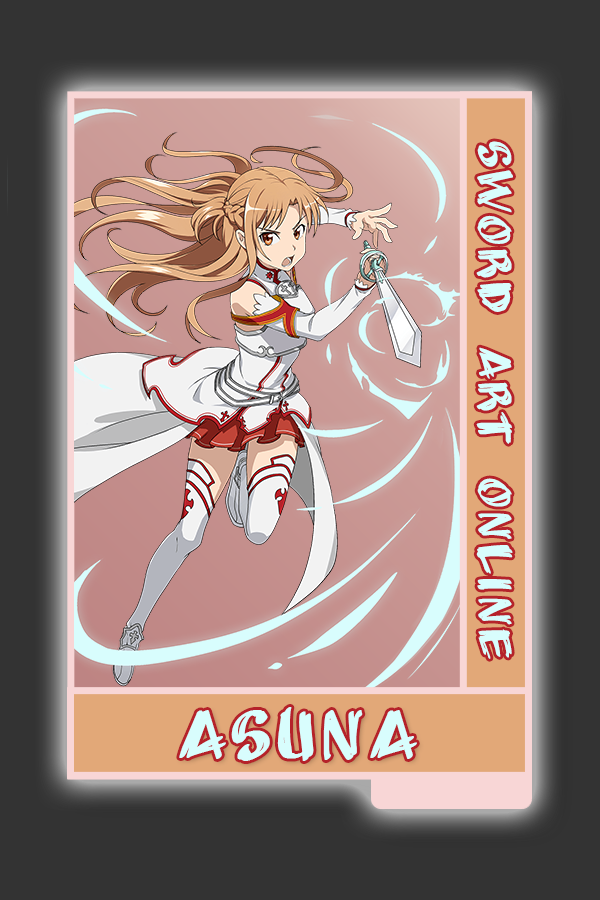
<style>
.page{position:relative;width:600px;height:900px;background:#333333}
.page>*{position:absolute;margin:0}
.t1{font:40px "AnuDaw";color:#d8fdfd}
.t2{font:60px "AnuDaw";color:#d8fdfd}
</style>
<div class="page">
<p class="t1" style="left:476px;top:141px;width:38px;height:518px;rotate:90deg">Sword Art Online</p>
<p class="t2" style="left:179px;top:707px;width:238px;height:54px">Asuna</p>
</div>
